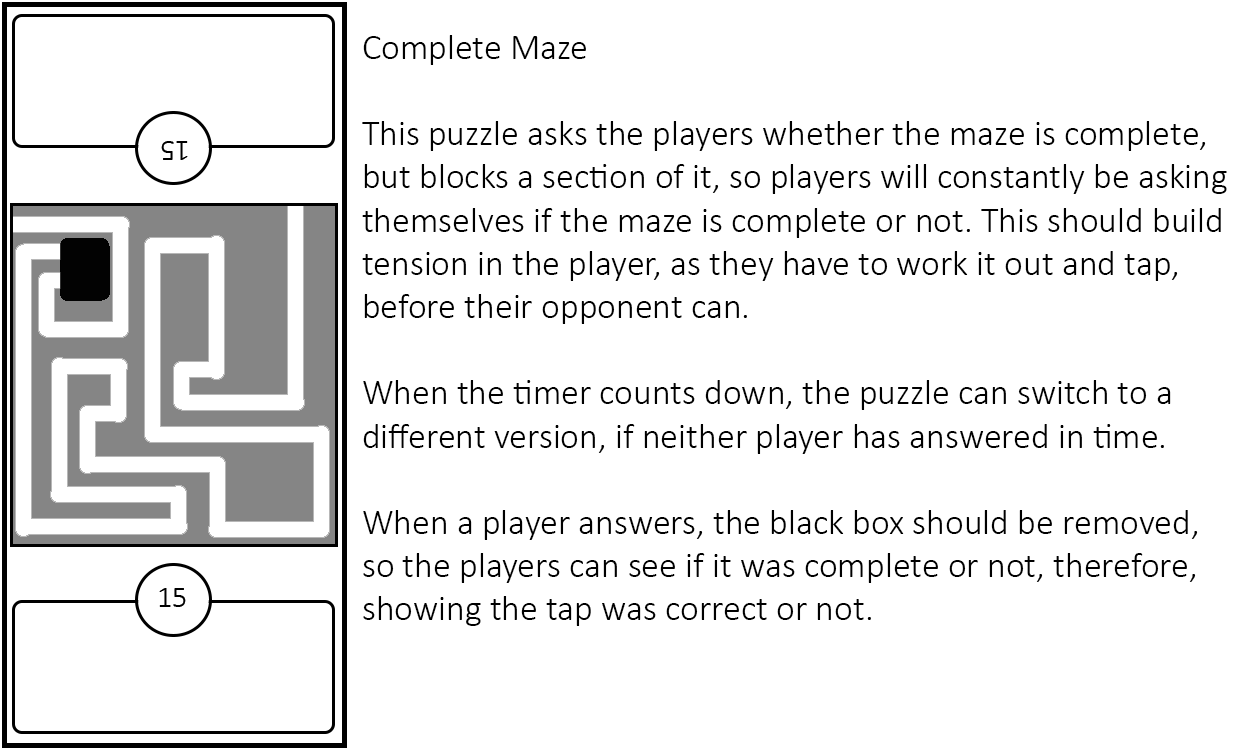
<style>
.page{position:relative;width:1250px;height:750px;background:#ffffff}
.page>*{position:absolute;margin:0}
.t1{font:36px "Calibri-Light";color:#000000}
</style>
<div class="page">
<p class="t1" style="left:362px;top:35px;width:865px;height:591px">Complete Maze<br><br>This puzzle asks the players whether the maze is complete,<br>but blocks a section of it, so players will constantly be asking<br>themselves if the maze is complete or not. This should build<br>tension in the player, as they have to work it out and tap, <br>before their opponent can.<br><br>When the timer counts down, the puzzle can switch to a<br>different version, if neither player has answered in time.<br><br>When a player answers, the black box should be removed,<br>so the players can see if it was complete or not, therefore,<br>showing the tap was correct or not.</p>
</div>
